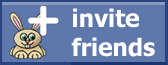
<style>
.page{position:relative;width:168px;height:65px;background:#5f78ab}
.page>*{position:absolute;margin:0}
.t1{font:24px "Tahoma-Bold";color:#ffffff}
</style>
<div class="page">
<p class="t1" style="left:71px;top:8px;width:84px;height:49px">invite<br>friends</p>
</div>
